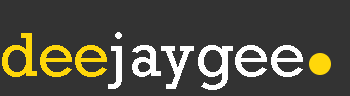
<style>
.page{position:relative;width:350px;height:96px;background:#333333}
.page>*{position:absolute;margin:0}
.t1{font:62.7px "Rockwell";color:#ffffff}
.t2{font:62.7px "Rockwell";color:#ffd70a}
</style>
<div class="page">
<p class="t1" style="left:2px;top:32px;width:301px;height:58px"><span class="t2">dee</span>jaygee</p>
</div>
